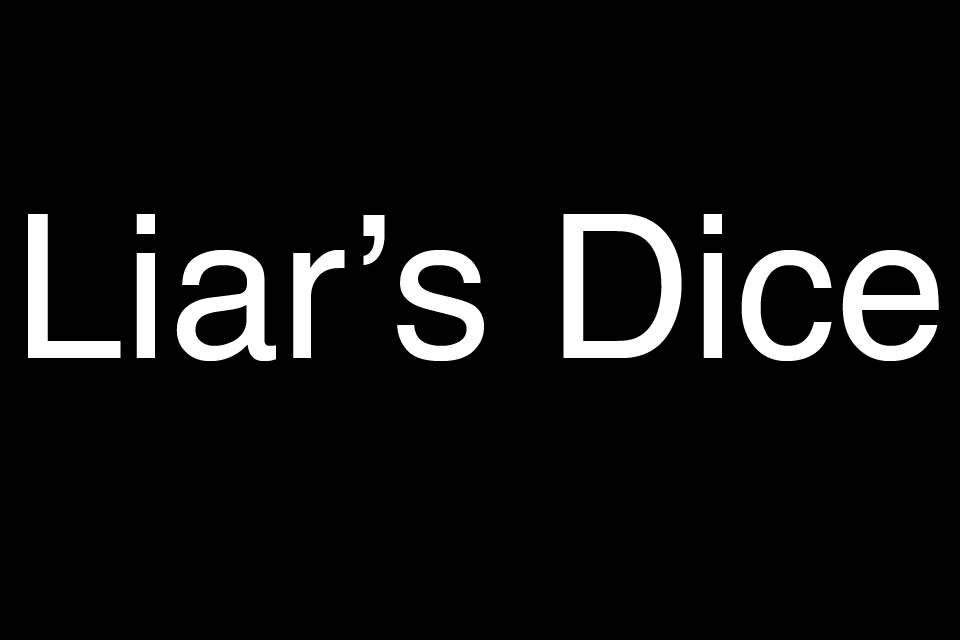
<style>
.page{position:relative;width:960px;height:640px;background:#000000}
.page>*{position:absolute;margin:0}
.t1{font:200px "Helvetica";color:#ffffff}
</style>
<div class="page">
<p class="t1" style="left:28px;top:214px;width:911px;height:147px">Liar’s Dice</p>
</div>
